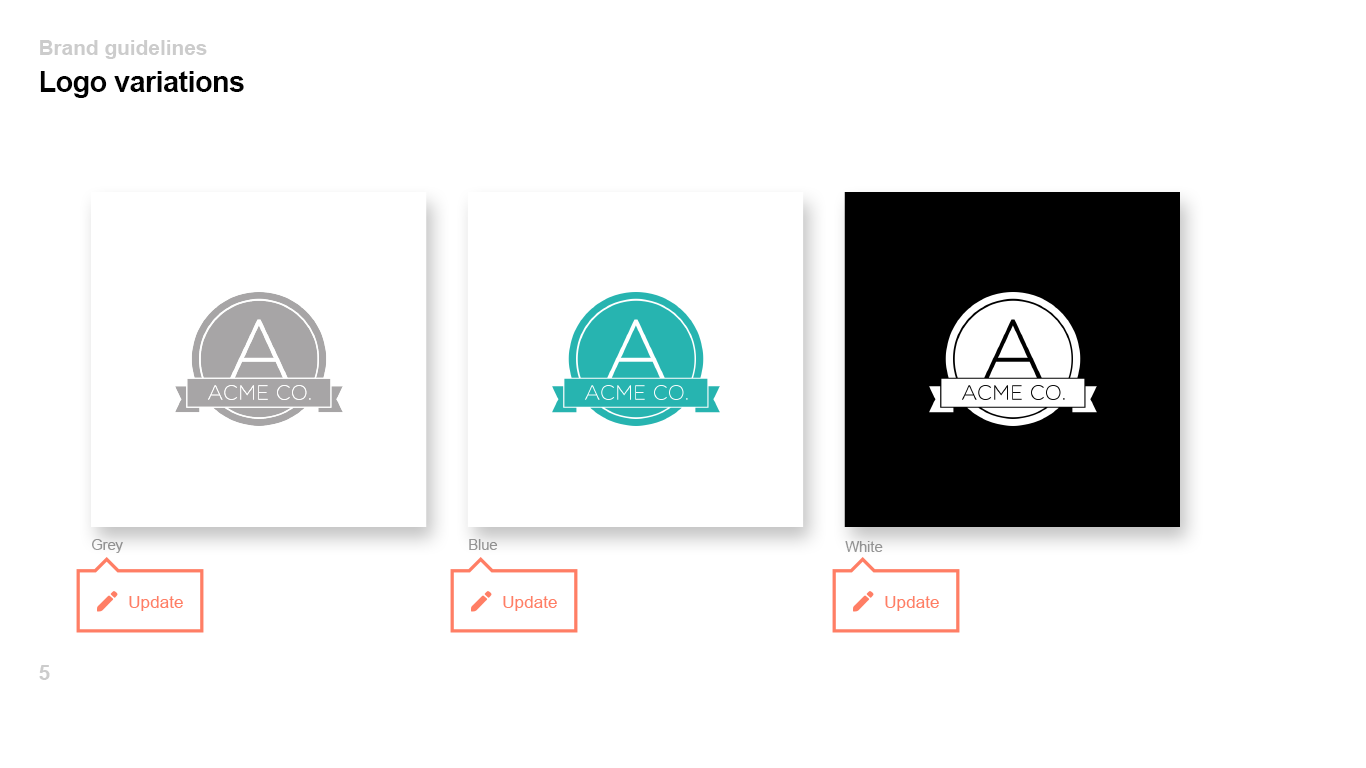
<style>
.page{position:relative;width:1366px;height:768px;background:#ffffff}
.page>*{position:absolute;margin:0}
.t1{font:20.8px "Arial-BoldMT";color:#cccccc}
.t2{font:29.2px "Arial-BoldMT";letter-spacing:-0.025em;color:#010101}
.t3{font:14.6px "ArialMT";color:#999999}
</style>
<div class="page">
<p class="t1" style="left:40px;top:40px;width:167px;height:19px">Brand guidelines</p>
<p class="t2" style="left:40px;top:71px;width:204px;height:27px">Logo variations</p>
<p class="t3" style="left:92px;top:539px;width:31px;height:14px">Grey</p>
<p class="t3" style="left:469px;top:539px;width:29px;height:11px">Blue</p>
<p class="t3" style="left:845px;top:541px;width:38px;height:11px">White</p>
<p class="t1" style="left:39px;top:665px;width:11px;height:15px">5</p>
</div>
